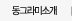
<style>
.page{position:relative;width:72px;height:21px;background:#f6f6f6}
.page>*{position:absolute;margin:0}
.t1{font:9.8px "YDIWebDotum";letter-spacing:-0.075em;color:#1e1d1d;scale:0.9 1}
</style>
<div class="page">
<p class="t1" style="left:12px;top:6px;width:45px;height:10px">동그라미소개</p>
</div>
